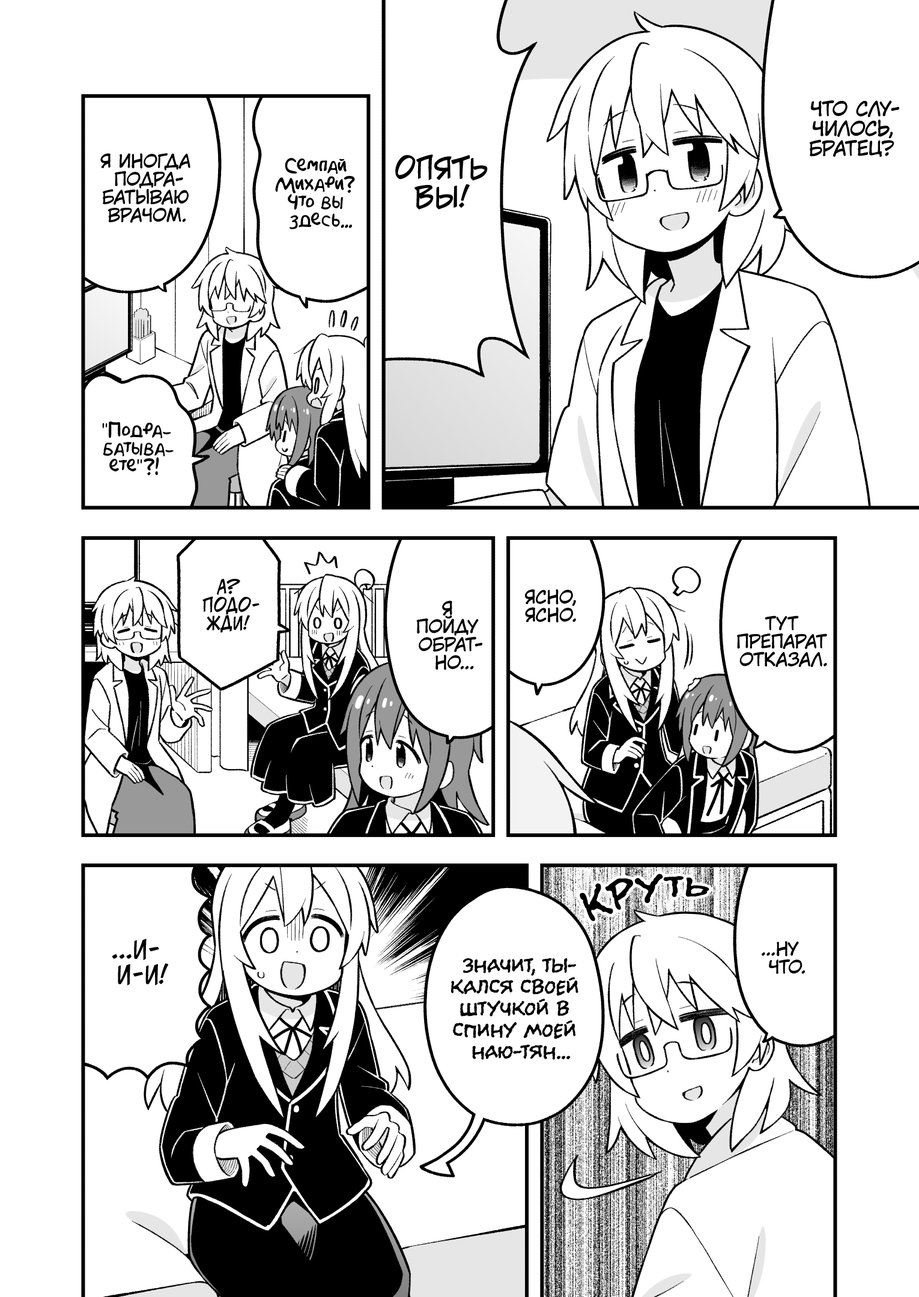
<style>
.page{position:relative;width:919px;height:1297px;background:#ffffff}
.page>*{position:absolute;margin:0}
.t1{font:19.8px "KuraiVoice2";color:#000000;text-transform:uppercase}
.t2{font:18px "KuraiVoice2";color:#000000;text-transform:uppercase}
.t3{font:18px "AkbarPlain";color:#000000}
.t4{font:28.8px "v_CCJeffCampbell";color:#000000;text-transform:uppercase}
.t5{font:18px "v_CCJeffCampbell";color:#000000;text-transform:uppercase}
.t6{font:39.6px "el_CCEvilSchemes";color:#000000}
.t7{font:25.2px "v_CCJeffCampbell";color:#000000;text-transform:uppercase}
.t8{font:21.6px "v_CCJeffCampbell";color:#000000;text-transform:uppercase}
.t9{font:21.6px "el_CCEvilSchemes";color:#000000;text-transform:uppercase}
</style>
<div class="page">
<p class="t1" style="left:810px;top:100px;width:89px;height:57px;text-align:center">Что слу-<br>чилось,<br>братец?</p>
<p class="t2" style="left:100px;top:153px;width:90px;height:70px;text-align:center">Я иногда<br>подра-<br>батываю<br>врачом.</p>
<p class="t3" style="left:275px;top:158px;width:80px;height:71px;text-align:center">Семпай<br>Михари?<br>Что вы<br>здесь...</p>
<p class="t4" style="left:395px;top:154px;width:93px;height:56px;text-align:center">Опять<br>вы!</p>
<p class="t3" style="left:102px;top:422px;width:72px;height:54px;text-align:center">"Подра-<br>батыва-<br>ете"?!</p>
<p class="t5" style="left:202px;top:579px;width:57px;height:54px;text-align:center">А?<br>Подо-<br>жди!</p>
<p class="t2" style="left:525px;top:589px;width:51px;height:34px;text-align:center">Ясно,<br>ясно.</p>
<p class="t2" style="left:416px;top:601px;width:66px;height:69px;text-align:center">Я<br>пойду<br>обрат-<br>но...</p>
<p class="t2" style="left:737px;top:616px;width:90px;height:51px;text-align:center">Тут<br>препарат<br>отказал.</p>
<p class="t6" style="left:580px;top:874px;width:129px;height:47px;rotate:-9deg">круть</p>
<p class="t7" style="left:112px;top:939px;width:57px;height:47px;text-align:center"><span class="t8">...</span>И-<br>и-и!</p>
<p class="t2" style="left:762px;top:941px;width:43px;height:33px;text-align:center">...Ну<br>что.</p>
<p class="t9" style="left:451px;top:958px;width:127px;height:102px;text-align:center">Значит, ты-<br>кался своей<br>штучкой в<br>спину моей<br>Наю-тян...</p>
</div>
